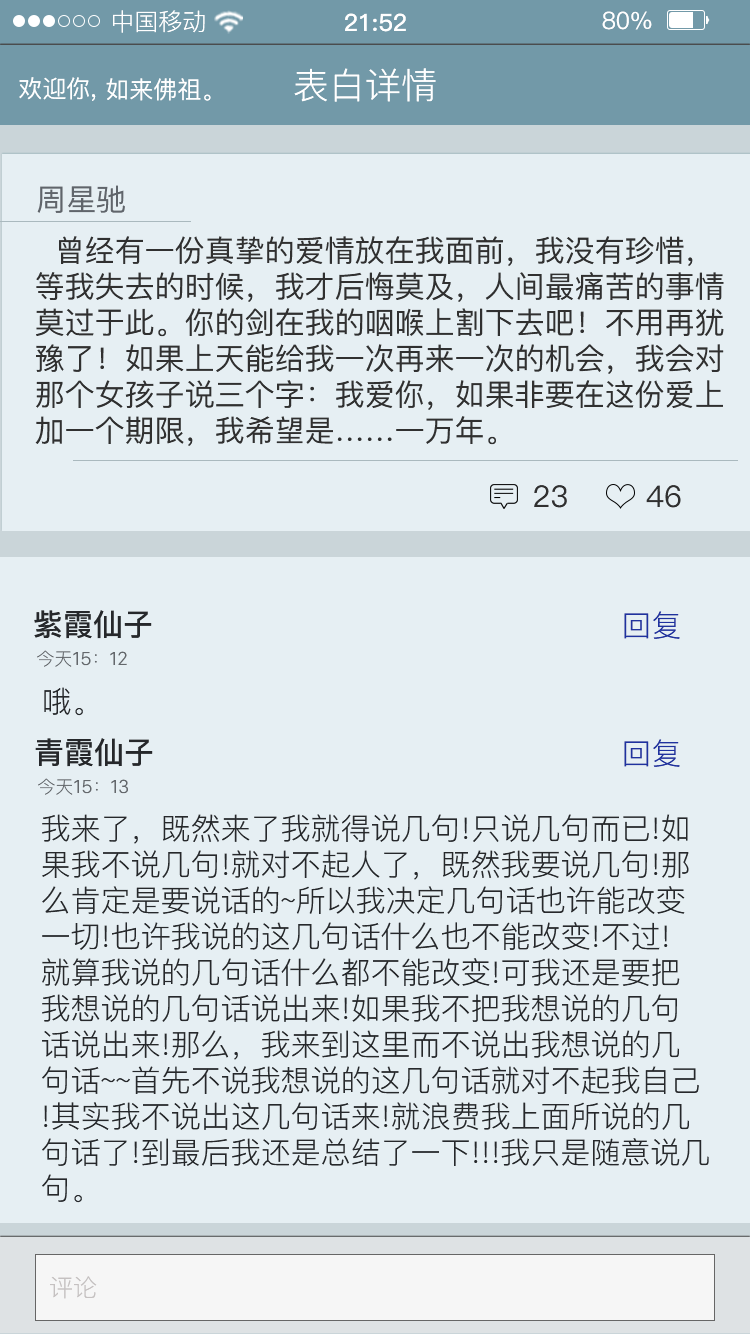
<style>
.page{position:relative;width:750px;height:1334px;background:#e6eff3}
.page>*{position:absolute;margin:0}
.t1{font:24px "PingFang-SC-Regular";color:#ffffff}
.t2{font:24px "PingFang-SC-Bold";color:#ffffff}
.t3{font:24px "PingFang-SC-Medium";color:#ffffff}
.t4{font:36px "PingFang-SC-Regular";color:#ffffff}
.t5{font:30px "PingFang-SC-Medium";color:#60656b}
.t6{font:30px "PingFang-SC-Medium";color:#303030}
.t7{font:30px "PingFang-SC-Bold";color:#26282b}
.t8{font:30px "PingFang-SC-Regular";color:#1f329f}
.t9{font:18px "PingFang-SC-Regular";color:#64686c}
.t10{font:18px "HelveticaNeueDeskInterface-Regular";color:#64686c}
.t11{font:30px "PingFang-SC-Regular";color:#26282b}
.t12{font:24px "PingFang-SC-Regular";color:#c5c1c1}
</style>
<div class="page">
<p class="t1" style="left:113px;top:10px;width:92px;height:23px">中国移动</p>
<p class="t2" style="left:345px;top:13px;width:61px;height:19px">21:52</p>
<p class="t3" style="left:602px;top:11px;width:50px;height:19px">80%</p>
<p class="t3" style="left:19px;top:77px;width:77px;height:24px">欢迎你,</p>
<p class="t3" style="left:106px;top:78px;width:105px;height:23px">如来佛祖。</p>
<p class="t4" style="left:294px;top:68px;width:142px;height:34px">表白详情</p>
<p class="t4" style="left:294px;top:68px;width:142px;height:34px">表白详情</p>
<p class="t5" style="left:37px;top:185px;width:88px;height:28px">周星驰</p>
<p class="t6" style="left:35px;top:236px;width:689px;height:210px">曾经有一份真挚的爱情放在我面前，我没有珍惜，<br>等我失去的时候，我才后悔莫及，人间最痛苦的事情<br>莫过于此。你的剑在我的咽喉上割下去吧！不用再犹<br>豫了！如果上天能给我一次再来一次的机会，我会对<br>那个女孩子说三个字：我爱你，如果非要在这份爱上<br>加一个期限，我希望是……一万年。</p>
<p class="t6" style="left:534px;top:485px;width:33px;height:23px">23</p>
<p class="t6" style="left:646px;top:485px;width:35px;height:23px">46</p>
<p class="t7" style="left:34px;top:610px;width:118px;height:29px">紫霞仙子</p>
<p class="t8" style="left:624px;top:611px;width:56px;height:28px">回复</p>
<p class="t9" style="left:37px;top:650px;width:90px;height:17px">今天<span class="t10">15</span>：<span class="t10">12</span></p>
<p class="t11" style="left:44px;top:687px;width:39px;height:29px">哦。</p>
<p class="t7" style="left:35px;top:738px;width:118px;height:29px">青霞仙子</p>
<p class="t8" style="left:624px;top:739px;width:56px;height:28px">回复</p>
<p class="t9" style="left:38px;top:778px;width:90px;height:17px">今天<span class="t10">15</span>：<span class="t10">13</span></p>
<p class="t11" style="left:42px;top:814px;width:667px;height:389px">我来了，既然来了我就得说几句!只说几句而已!如<br>果我不说几句!就对不起人了，既然我要说几句!那<br>么肯定是要说话的~所以我决定几句话也许能改变<br>一切!也许我说的这几句话什么也不能改变!不过!<br>就算我说的几句话什么都不能改变!可我还是要把<br>我想说的几句话说出来!如果我不把我想说的几句<br>话说出来!那么，我来到这里而不说出我想说的几<br>句话~~首先不说我想说的这几句话就对不起我自己<br>!其实我不说出这几句话来!就浪费我上面所说的几<br>句话了!到最后我还是总结了一下!!!我只是随意说几<br>句。</p>
<p class="t12" style="left:50px;top:1276px;width:47px;height:23px">评论</p>
</div>
